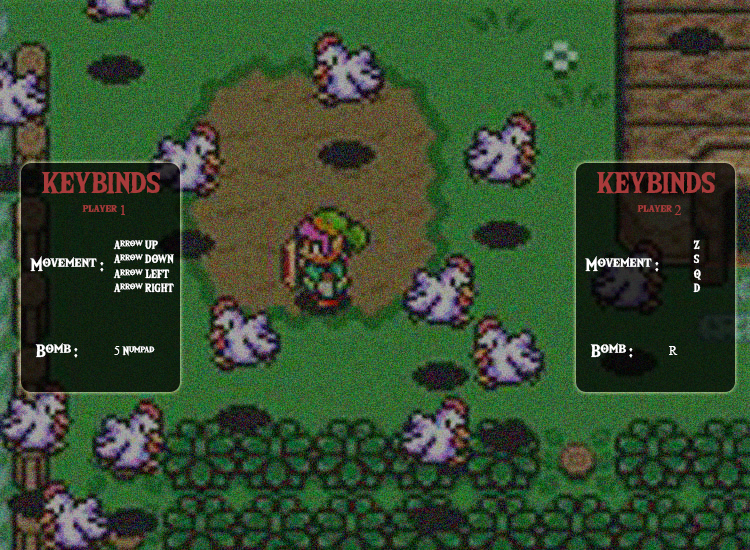
<style>
.page{position:relative;width:750px;height:550px}
.page>*{position:absolute;margin:0}
.t1{font:30px "TheWildBreathofZelda";color:#a83b3b}
.t2{font:14px "TheWildBreathofZelda";color:#a83b3b}
.t3{font:14px "TimesNewRomanPSMT";color:#a83b3b}
.t4{font:12px "TheWildBreathofZelda";color:#ffffff}
.t5{font:18px "TheWildBreathofZelda";color:#ffffff}
.t6{font:12px "TimesNewRomanPSMT";color:#ffffff}
</style>
<div class="page">
<p class="t1" style="left:41px;top:171px;width:119px;height:23px">KEYBINDS</p>
<p class="t1" style="left:596px;top:171px;width:119px;height:23px">KEYBINDS</p>
<p class="t2" style="left:82px;top:205px;width:43px;height:10px">player <span class="t3">1</span></p>
<p class="t2" style="left:637px;top:205px;width:44px;height:10px">player <span class="t3">2</span></p>
<p class="t4" style="left:113px;top:240px;width:61px;height:53px">Arrow UP<br>Arrow DOWN<br>Arrow LEFT<br>Arrow RIGHT</p>
<p class="t4" style="left:693px;top:240px;width:8px;height:53px">Z<br>S<br>Q<br>D</p>
<p class="t5" style="left:30px;top:256px;width:74px;height:16px">Movement :</p>
<p class="t5" style="left:585px;top:256px;width:74px;height:16px">Movement :</p>
<p class="t5" style="left:35px;top:343px;width:43px;height:15px">Bomb :</p>
<p class="t4" style="left:114px;top:345px;width:41px;height:11px"><span class="t6">5 </span>Numpad</p>
<p class="t5" style="left:590px;top:343px;width:43px;height:15px">Bomb :</p>
<p class="t6" style="left:669px;top:346px;width:9px;height:9px">R</p>
</div>
